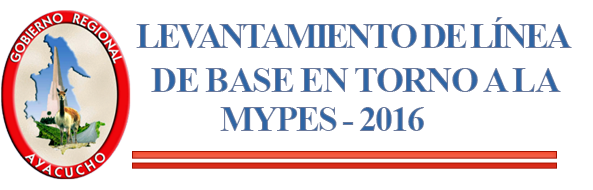
<style>
.page{position:relative;width:593px;height:190px;background:#ffffff}
.page>*{position:absolute;margin:0}
.t1{font:36px "TimesNewRomanPS-BoldMT";letter-spacing:-0.085em}
.t2{font:36px "TimesNewRomanPS-BoldMT";letter-spacing:-0.045em}
.t3{font:36px "TimesNewRomanPS-BoldMT";letter-spacing:-0.06em}
</style>
<div class="page">
<p class="t1" style="left:136px;top:17px;width:436px;height:31px">LEVANTAMIENTO DE LÍNEA</p>
<p class="t2" style="left:151px;top:68px;width:410px;height:24px">DE BASE EN TORNO A LA</p>
<p class="t3" style="left:220px;top:107px;width:204px;height:24px">MYPES - 2016</p>
</div>
